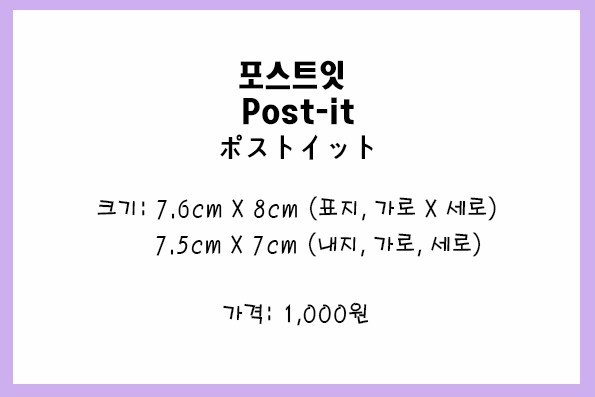
<style>
.page{position:relative;width:595px;height:397px;background:#fffefe}
.page>*{position:absolute;margin:0}
.t1{font:30px/36px "HeadlineR-HM";color:#010101;scale:0.9 1}
.t2{font:24px/36px "H2porM";color:#040404;scale:0.9 1}
.t3{font:24px "H2porM";color:#040404;scale:0.9 1}
</style>
<div class="page">
<p class="t1" style="left:220px;top:60px;width:153px;height:100px;text-align:center">포스트잇 <br>Post-it<br>ポストイット</p>
<p class="t2" style="left:97px;top:196px;width:399px;height:61px">크기: 7.6cm X 8cm (표지, 가로 X 세로) <br>        7.5cm X 7cm (내지, 가로, 세로)</p>
<p class="t3" style="left:223px;top:302px;width:146px;height:24px">가격: 1,000원</p>
</div>
